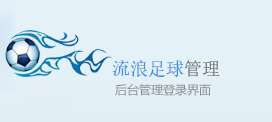
<style>
.page{position:relative;width:272px;height:122px;background:#e4f1f9}
.page>*{position:absolute;margin:0}
.t1{font:18px "SimSun";color:#3a8be3}
.t2{font:18px "SimSun";color:#656566}
.t3{font:12px "MicrosoftYaHei";color:#8b8b8b}
</style>
<div class="page">
<p class="t1" style="left:112px;top:60px;width:108px;height:17px">流浪足球<span class="t2">管理</span></p>
<p class="t3" style="left:115px;top:83px;width:96px;height:13px">后台管理登录界面</p>
</div>
